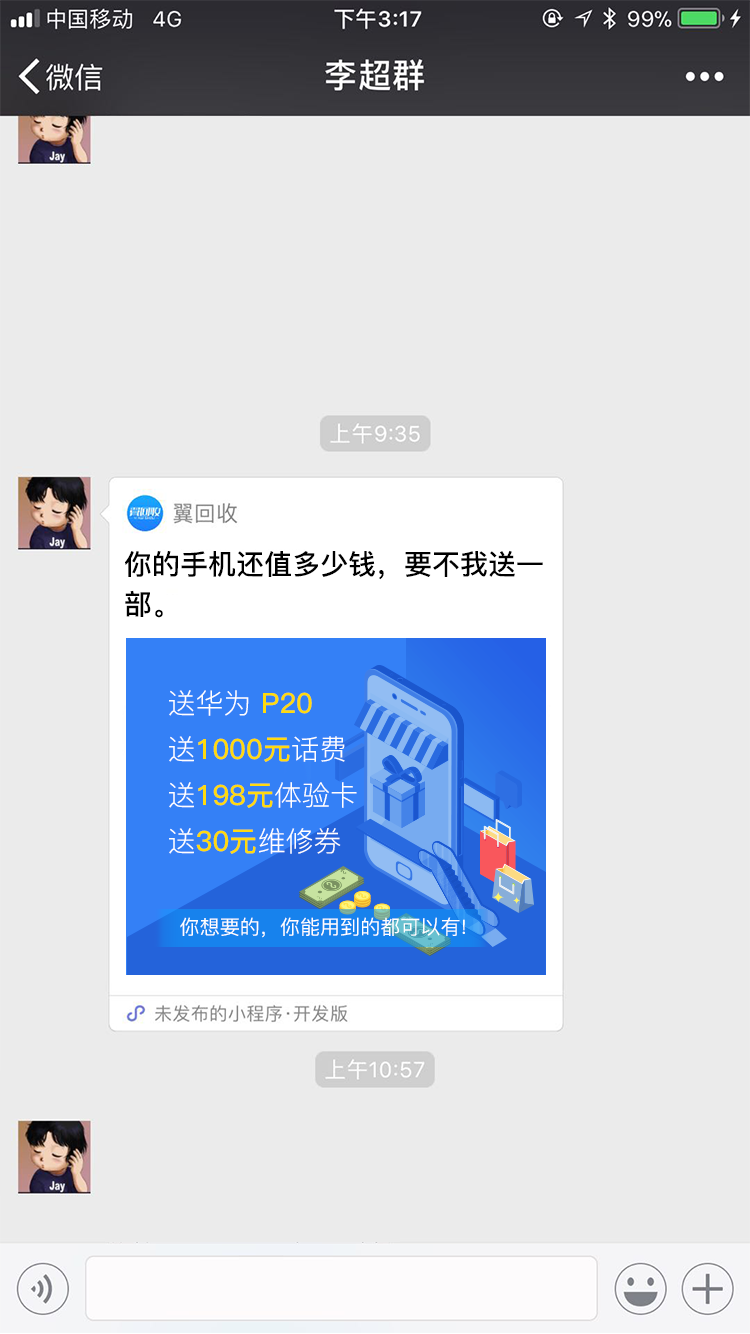
<style>
.page{position:relative;width:750px;height:1334px;background:#ebebeb}
.page>*{position:absolute;margin:0}
.t1{font:28px/40px "PingFang-SC-Bold";color:#000000}
.t2{font:28px/46px "PingFang-SC-Bold";color:#ffda0e}
.t3{font:28px/46px "PingFang-SC-Regular";color:#ffffff}
.t4{font:20px "PingFang-SC-Medium";color:#ffffff}
</style>
<div class="page">
<p class="t1" style="left:125px;top:550px;width:418px;height:68px">你的手机还值多少钱，要不我送一<br>部。</p>
<p class="t2" style="left:169px;top:690px;width:188px;height:164px"><span class="t3">送华为 </span>P20<br><span class="t3">送</span>1000元<span class="t3">话费<br>送</span>198元<span class="t3">体验卡<br>送</span>30元<span class="t3">维修券</span></p>
<p class="t4" style="left:180px;top:917px;width:285px;height:21px">你想要的，你能用到的都可以有!</p>
</div>
